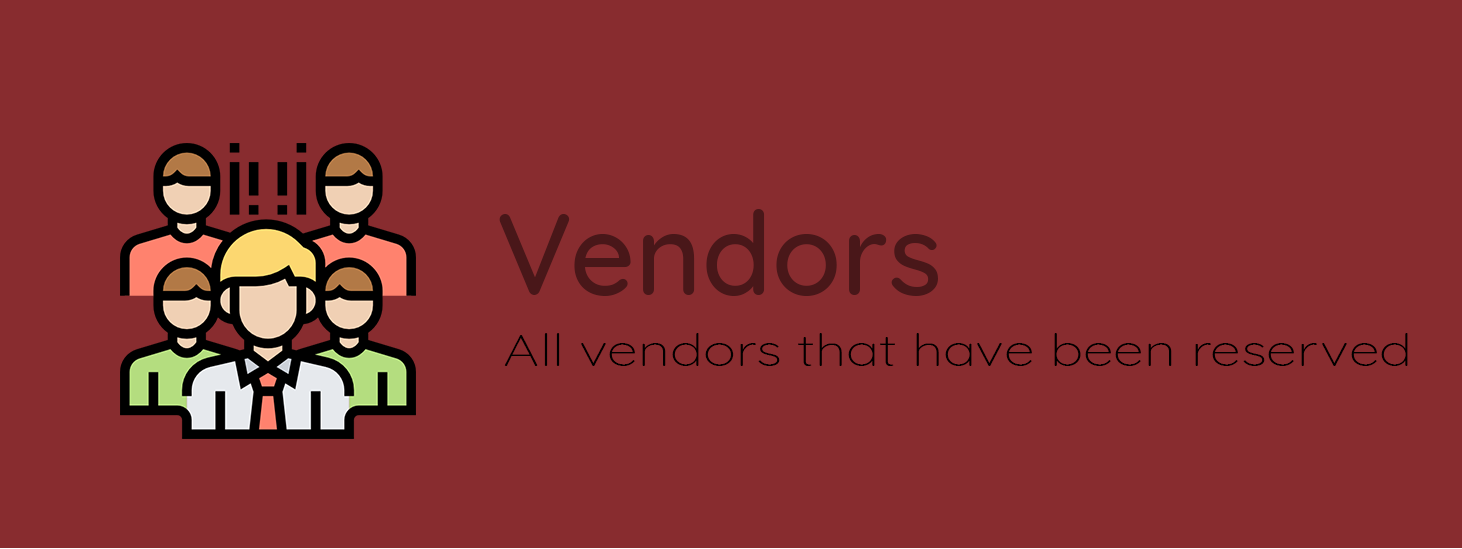
<style>
.page{position:relative;width:1462px;height:549px;background:#882c2f}
.page>*{position:absolute;margin:0}
.t1{font:116px "Quicksand-Medium";color:#491719}
.t2{font:44.9px "Quicksand-Light";color:#000000;scale:1.24 1}
</style>
<div class="page">
<p class="t1" style="left:499px;top:209px;width:439px;height:87px">Vendors</p>
<p class="t2" style="left:504px;top:333px;width:904px;height:33px">All vendors that have been reserved</p>
</div>
